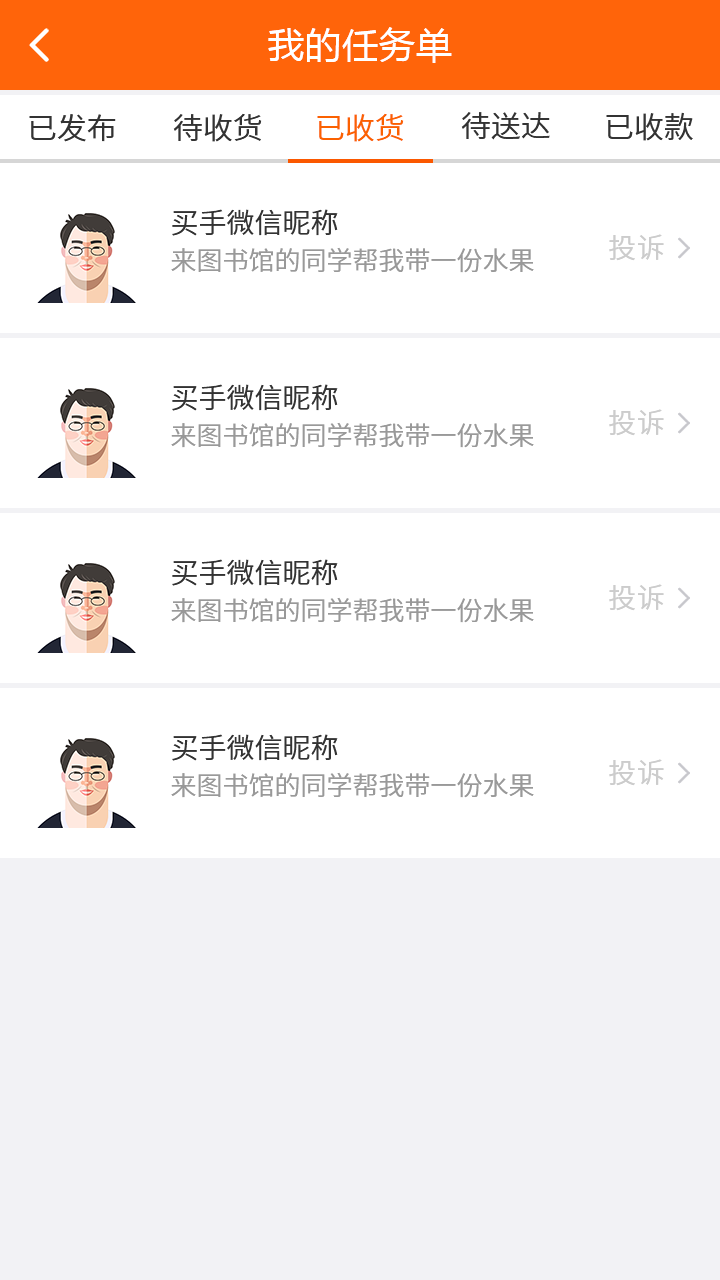
<style>
.page{position:relative;width:720px;height:1280px;background:#ffffff}
.page>*{position:absolute;margin:0}
.t1{font:36px "MicrosoftYaHei";letter-spacing:0.03em;color:#ffffff}
.t2{font:30px "NotoSansCJKsc-DemiLight";color:#333333;font-variant:small-caps}
.t3{font:30px "NotoSansCJKsc-DemiLight";color:#fb6100;font-variant:small-caps}
.t4{font:28px "NotoSansCJKsc-DemiLight";color:#333333;font-variant:small-caps}
.t5{font:28px "NotoSansCJKsc-DemiLight";letter-spacing:0.03em;color:#cccccc;font-variant:small-caps}
.t6{font:26px "NotoSansCJKsc-DemiLight";color:#999999;font-variant:small-caps}
</style>
<div class="page">
<p class="t1" style="left:268px;top:27px;width:184px;height:36px">我的任务单</p>
<p class="t2" style="left:173px;top:113px;width:89px;height:29px">待收货</p>
<p class="t3" style="left:317px;top:113px;width:87px;height:29px">已收货</p>
<p class="t2" style="left:461px;top:112px;width:89px;height:28px">待送达</p>
<p class="t2" style="left:606px;top:112px;width:87px;height:29px">已收款</p>
<p class="t2" style="left:29px;top:114px;width:87px;height:28px">已发布</p>
<p class="t4" style="left:172px;top:209px;width:166px;height:27px">买手微信昵称</p>
<p class="t5" style="left:609px;top:234px;width:55px;height:27px">投诉</p>
<p class="t6" style="left:171px;top:247px;width:363px;height:26px">来图书馆的同学帮我带一份水果</p>
<p class="t4" style="left:172px;top:384px;width:166px;height:27px">买手微信昵称</p>
<p class="t5" style="left:609px;top:409px;width:55px;height:27px">投诉</p>
<p class="t6" style="left:171px;top:422px;width:363px;height:26px">来图书馆的同学帮我带一份水果</p>
<p class="t4" style="left:172px;top:559px;width:166px;height:27px">买手微信昵称</p>
<p class="t5" style="left:609px;top:584px;width:55px;height:27px">投诉</p>
<p class="t6" style="left:171px;top:597px;width:363px;height:26px">来图书馆的同学帮我带一份水果</p>
<p class="t4" style="left:172px;top:734px;width:166px;height:27px">买手微信昵称</p>
<p class="t5" style="left:609px;top:759px;width:55px;height:27px">投诉</p>
<p class="t6" style="left:171px;top:772px;width:363px;height:26px">来图书馆的同学帮我带一份水果</p>
</div>
